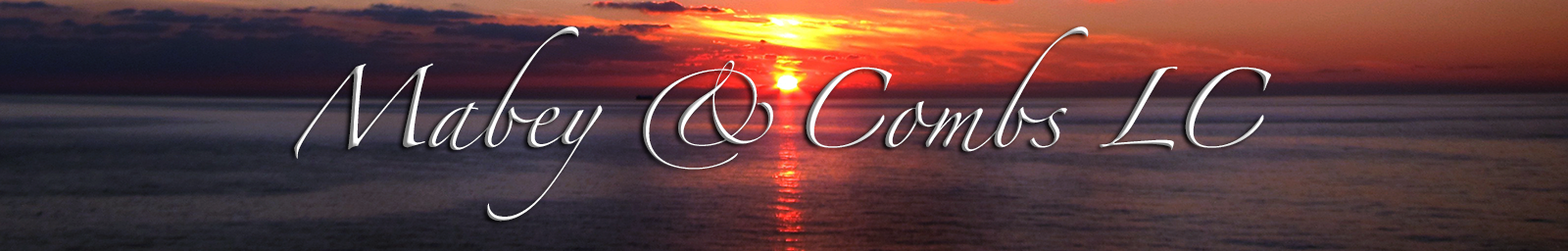
<style>
.page{position:relative;width:1568px;height:251px}
.page>*{position:absolute;margin:0}
.t1{font:70.6px "Zapfino"}
</style>
<div class="page">
<p class="t1" style="left:294px;top:26px;width:977px;height:195px;text-align:center">Mabey &amp;Combs LC</p>
</div>
